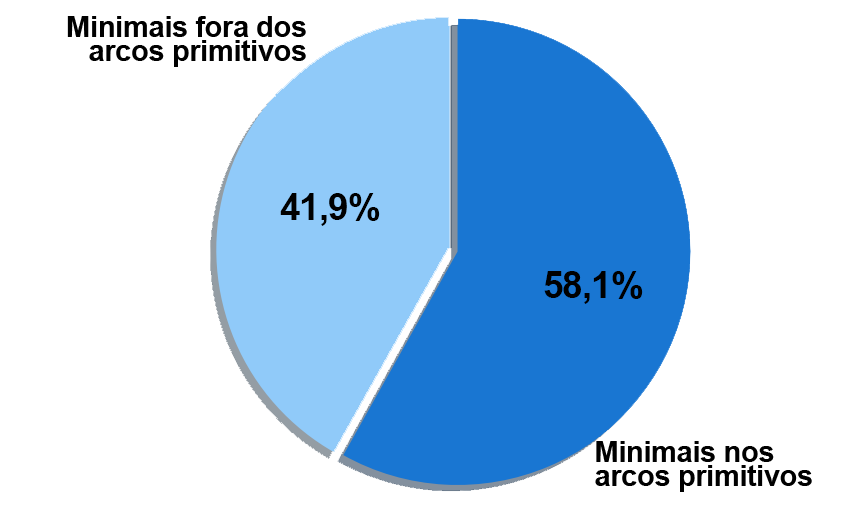
<style>
.page{position:relative;width:842px;height:507px;background:#ffffff}
.page>*{position:absolute;margin:0}
.t1{font:29.5px/24px "Arial-BoldMT";letter-spacing:-0.02em;color:#000000}
.t2{font:36.7px "Arial-BoldMT";letter-spacing:-0.02em;color:#000000}
</style>
<div class="page">
<p class="t1" style="left:67px;top:16px;width:239px;height:51px;text-align:right">Minimais fora dos<br>arcos primitivos</p>
<p class="t2" style="left:280px;top:193px;width:100px;height:33px">41,9%</p>
<p class="t2" style="left:544px;top:271px;width:99px;height:33px">58,1%</p>
<p class="t1" style="left:595px;top:441px;width:217px;height:51px">Minimais nos<br>arcos primitivos</p>
</div>
